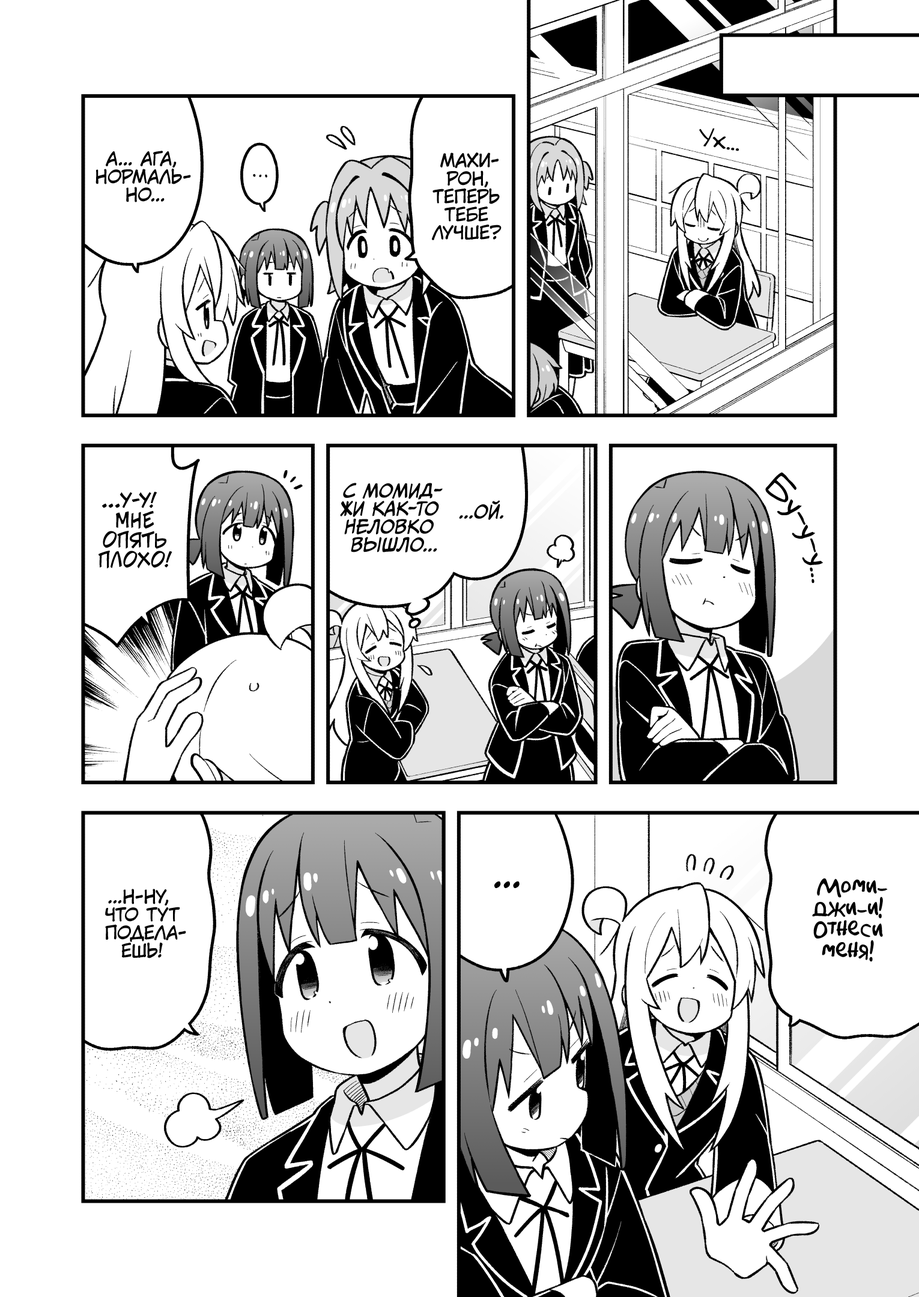
<style>
.page{position:relative;width:919px;height:1297px;background:#ffffff}
.page>*{position:absolute;margin:0}
.t1{font:25.2px "v_Augie";color:#000000}
.t2{font:18px "KuraiVoice2";color:#000000;text-transform:uppercase}
.t3{font:28.8px "v_Augie";color:#000000}
.t4{font:18px "CCMeanwhile";color:#000000;text-transform:uppercase;font-style:italic}
.t5{font:19.8px "v_CCJeffCampbell";color:#000000;text-transform:uppercase}
.t6{font:36px "KuraiVoice2";color:#000000;text-transform:uppercase}
.t7{font:21.6px "AkbarPlain";color:#000000}
</style>
<div class="page">
<p class="t1" style="left:699px;top:128px;width:40px;height:23px;rotate:8deg">Ух...</p>
<p class="t2" style="left:96px;top:151px;width:95px;height:51px;text-align:center">А... Ага,<br>нормаль-<br>но...</p>
<p class="t2" style="left:432px;top:153px;width:70px;height:87px;text-align:center">Махи-<br>рон,<br>теперь<br>тебе<br>лучше?</p>
<p class="t3" style="left:765px;top:472px;width:59px;height:111px;rotate:65deg">Бу-у-у...</p>
<p class="t4" style="left:340px;top:483px;width:103px;height:70px;text-align:center">С Момид-<br>жи как-то<br>неловко<br>вышло...</p>
<p class="t5" style="left:98px;top:492px;width:74px;height:77px;text-align:center">...У-у!<br>Мне<br>опять<br>плохо!</p>
<p class="t4" style="left:459px;top:500px;width:44px;height:20px">...Ой.</p>
<p class="t6" style="left:494px;top:881px;width:26px;height:7px">...</p>
<p class="t7" style="left:812px;top:878px;width:76px;height:84px;text-align:center">Моми-<br>джи-и!<br>Отнеси<br>меня!</p>
<p class="t2" style="left:105px;top:889px;width:81px;height:70px;text-align:center">...Н-ну,<br>что тут<br>подела-<br>ешь!</p>
</div>
